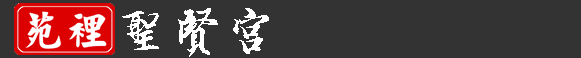
<style>
.page{position:relative;width:581px;height:58px;background:#333333}
.page>*{position:absolute;margin:0}
.t1{font:53.3px "SCFwxz";color:#ffffff}
</style>
<div class="page">
<p class="t1" style="left:122px;top:8px;width:147px;height:49px">聖賢宮</p>
</div>
